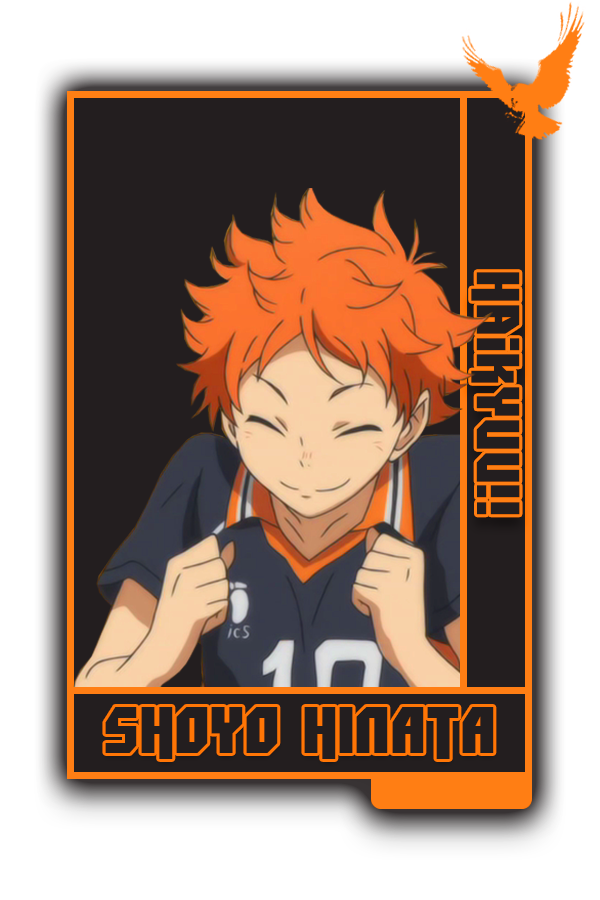
<style>
.page{position:relative;width:600px;height:900px;background:#231e1f}
.page>*{position:absolute;margin:0}
.t1{font:60.7px "Dimitri";color:#231f20}
.t2{font:65.2px "Dimitri";color:#231f20}
</style>
<div class="page">
<p class="t1" style="left:471px;top:272px;width:49px;height:243px;rotate:90deg">Haikyuu!!</p>
<p class="t2" style="left:105px;top:707px;width:389px;height:52px">SHOYO HINATA</p>
</div>
